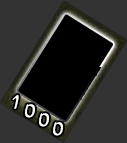
<style>
.page{position:relative;width:127px;height:143px;background:#333333}
.page>*{position:absolute;margin:0}
.t1{font:18px/9px "Borealis";letter-spacing:0.1em;color:#ffffff}
</style>
<div class="page">
<p class="t1" style="left:12px;top:95px;width:51px;height:41px">1<br>  0<br>    0<br>      0</p>
</div>
